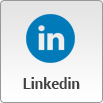
<style>
.page{position:relative;width:103px;height:103px}
.page>*{position:absolute;margin:0}
.t1{font:15px "Roboto-Bold";color:#414141}
</style>
<div class="page">
<p class="t1" style="left:23px;top:77px;width:57px;height:12px">Linkedin</p>
</div>
